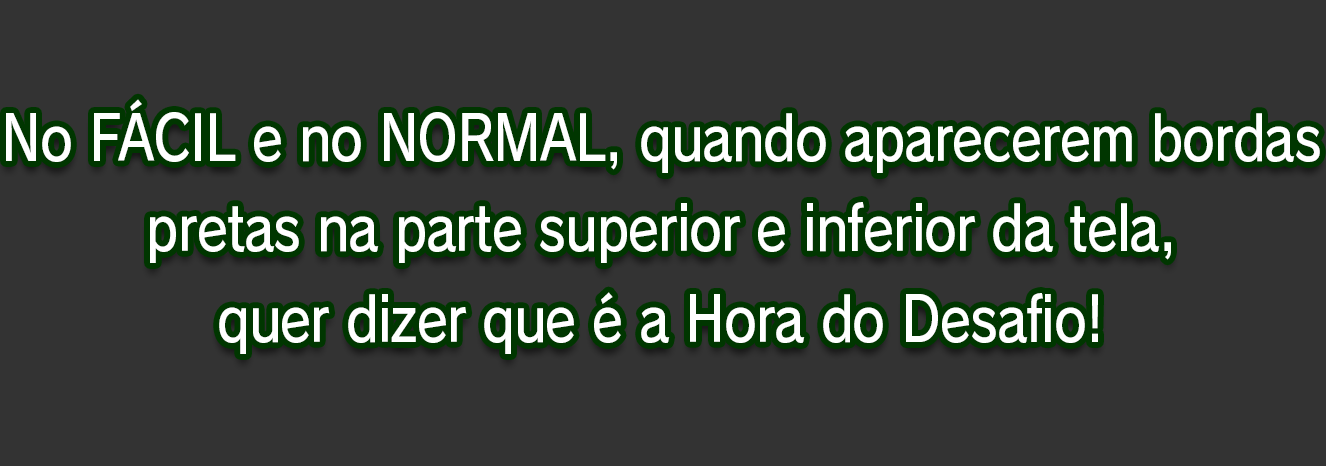
<style>
.page{position:relative;width:1326px;height:466px;background:#333333}
.page>*{position:absolute;margin:0}
.t1{font:61.3px/90.7px "RodinPro-DB";letter-spacing:-0.022em;color:#ffffff;scale:0.84 1}
</style>
<div class="page">
<p class="t1" style="left:6px;top:99px;width:1314px;height:255px;text-align:center">No FÁCIL e no NORMAL, quando aparecerem bordas<br>pretas na parte superior e inferior da tela,<br>quer dizer que é a Hora do Desafio!</p>
</div>
